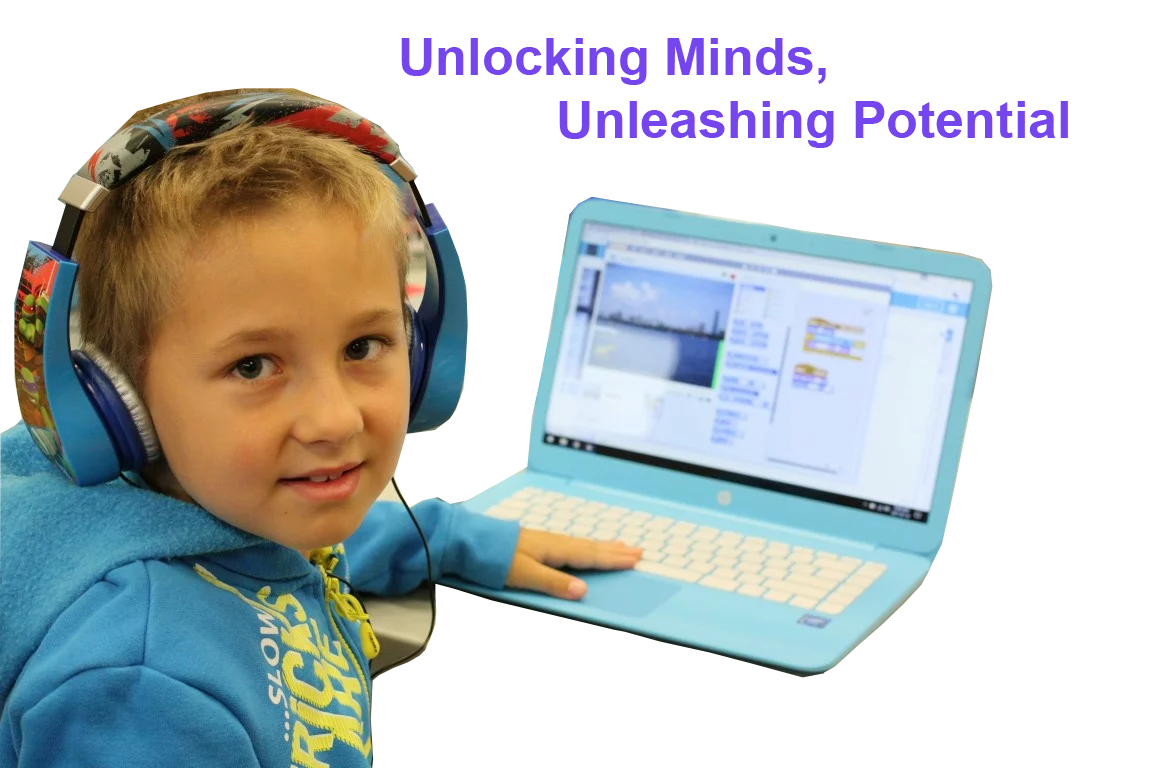
<style>
.page{position:relative;width:1152px;height:768px;background:#ffffff}
.page>*{position:absolute;margin:0}
.t1{font:52.1px "Arial-BoldMT";color:#7546ee}
</style>
<div class="page">
<p class="t1" style="left:401px;top:38px;width:667px;height:110px">Unlocking Minds,<br>     Unleashing Potential</p>
</div>
